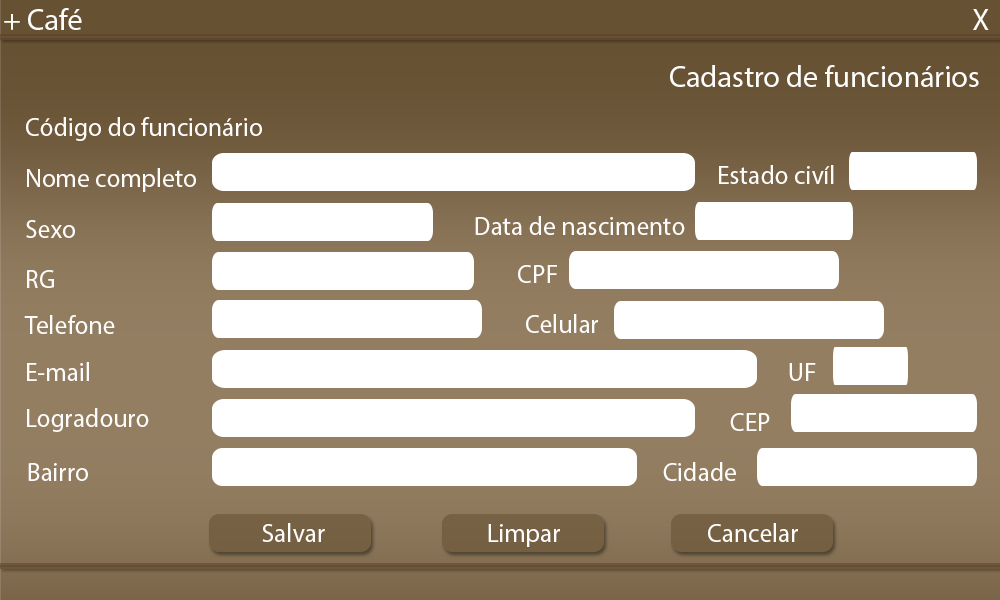
<style>
.page{position:relative;width:1000px;height:600px;background:#ffffff}
.page>*{position:absolute;margin:0}
.t1{font:30px "MyriadPro-Regular";color:#fefdfb}
.t2{font:30.1px "MyriadPro-Regular";color:#fefdfb}
.t3{font:29.9px "MyriadPro-Regular";color:#fefdfb}
.t4{font:25.7px "MyriadPro-Regular";color:#fefdfb}
.t5{font:55.1px "MyriadPro-Regular";color:#fefdfb}
</style>
<div class="page">
<p class="t1" style="left:4px;top:8px;width:78px;height:22px">+ Café</p>
<p class="t2" style="left:973px;top:9px;width:16px;height:21px">X</p>
<p class="t3" style="left:670px;top:65px;width:309px;height:22px">Cadastro de funcionários</p>
<p class="t4" style="left:26px;top:117px;width:236px;height:24px">Código do funcionário<br><br><span class="t5">Non</span></p>
<p class="t4" style="left:27px;top:168px;width:169px;height:24px">Nome completo<br><span class="t5">Non</span></p>
<p class="t4" style="left:719px;top:165px;width:115px;height:19px">Estado civíl<br><br><span class="t5">Non</span></p>
<p class="t4" style="left:26px;top:220px;width:49px;height:18px">Sexo<br><span class="t5">Non</span></p>
<p class="t4" style="left:475px;top:216px;width:210px;height:19px">Data de nascimento<br><span class="t5">Non</span></p>
<p class="t5" style="left:27px;top:270px;width:27px;height:18px"><span class="t4">RG<br></span>Non</p>
<p class="t4" style="left:518px;top:265px;width:39px;height:18px">CPF<br><br><span class="t5">Non</span></p>
<p class="t4" style="left:24px;top:315px;width:91px;height:19px">Telefone<br><span class="t5">Non</span></p>
<p class="t4" style="left:526px;top:314px;width:72px;height:19px">Celular<br><br><span class="t5">Non</span></p>
<p class="t4" style="left:27px;top:362px;width:62px;height:19px">E-mail<br><br><span class="t5">Non</span></p>
<p class="t5" style="left:789px;top:363px;width:27px;height:18px"><span class="t4">UF<br><br><br></span>Non</p>
<p class="t4" style="left:27px;top:408px;width:122px;height:24px">Logradouro<br><br><span class="t5">Non</span></p>
<p class="t4" style="left:730px;top:413px;width:40px;height:18px">CEP<br><br><span class="t5">Non</span></p>
<p class="t4" style="left:663px;top:462px;width:73px;height:19px">Cidade<br><br><span class="t5">Non</span></p>
<p class="t4" style="left:28px;top:463px;width:60px;height:18px">Bairro<br><br><br><span class="t5">Non</span></p>
<p class="t4" style="left:262px;top:523px;width:63px;height:19px">Salvar<br><br><br><span class="t5">Non</span></p>
<p class="t4" style="left:488px;top:524px;width:72px;height:23px">Limpar<br><br><br><span class="t5">Non</span></p>
<p class="t4" style="left:708px;top:523px;width:90px;height:19px">Cancelar<br><br><br><br><span class="t5">Non</span></p>
</div>
